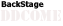
<style>
.page{position:relative;width:63px;height:26px;background:#ffffff}
.page>*{position:absolute;margin:0}
.t1{font:8px "Tahoma-Bold";color:#060606}
.t2{font:14px "StencilStd";color:#f4eeee}
</style>
<div class="page">
<p class="t1" style="left:1px;top:1px;width:43px;height:8px">BackStage</p>
<p class="t2" style="left:0px;top:10px;width:61px;height:11px">DDCOME</p>
</div>
